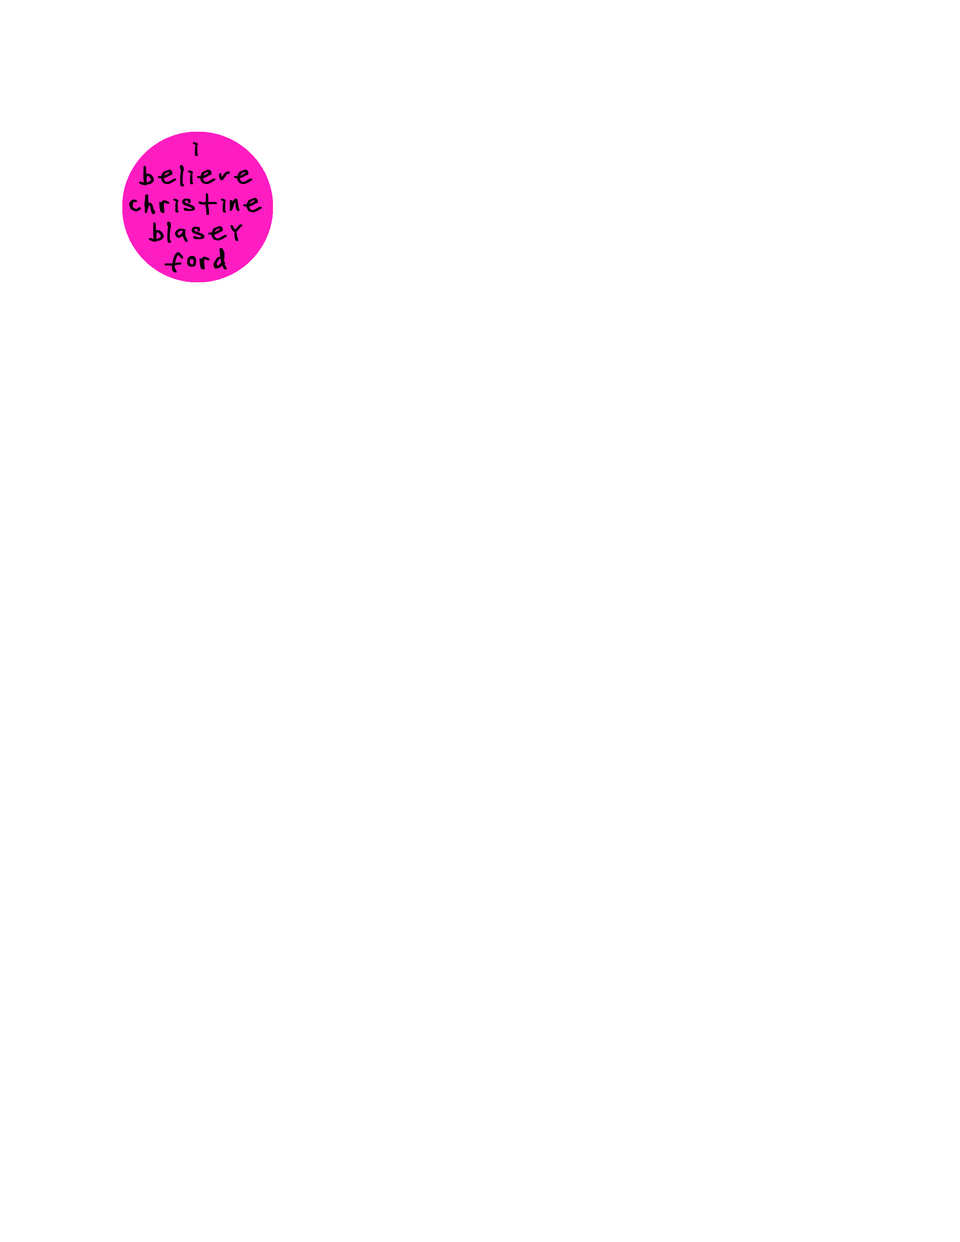
<style>
.page{position:relative;width:960px;height:1242px;background:#ffffff}
.page>*{position:absolute;margin:0}
.t1{font:34.5px/28.2px "SqueeRegular";color:#000000;font-weight:bold}
</style>
<div class="page">
<p class="t1" style="left:129px;top:142px;width:133px;height:131px;text-align:center">i<br>believe<br>christine<br>blasey<br>ford</p>
</div>
